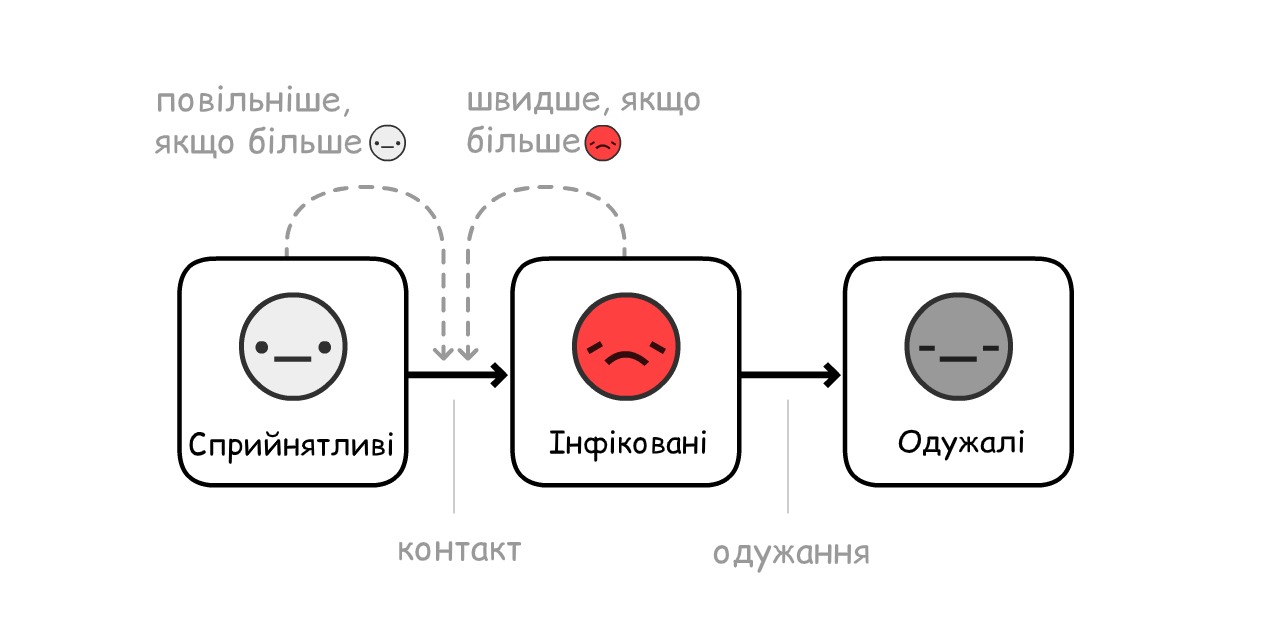
<style>
.page{position:relative;width:1280px;height:640px;background:#ffffff}
.page>*{position:absolute;margin:0}
.t1{font:35px "ComicRelief";color:#999999}
.t2{font:31px "ComicRelief";color:#000000}
.t3{font:30px "ComicRelief";color:#000000;scale:1.06 1}
</style>
<div class="page">
<p class="t1" style="left:153px;top:85px;width:210px;height:74px">повільніше, <br>якщо більше</p>
<p class="t1" style="left:467px;top:91px;width:233px;height:63px">швидше, якщо<br>більше</p>
<p class="t2" style="left:189px;top:430px;width:204px;height:34px">Сприйнятливі</p>
<p class="t2" style="left:549px;top:430px;width:157px;height:32px">Інфіковані</p>
<p class="t3" style="left:898px;top:429px;width:126px;height:32px">Одужалі</p>
<p class="t1" style="left:399px;top:541px;width:123px;height:21px">контакт</p>
<p class="t1" style="left:713px;top:544px;width:156px;height:30px">одужання</p>
</div>
